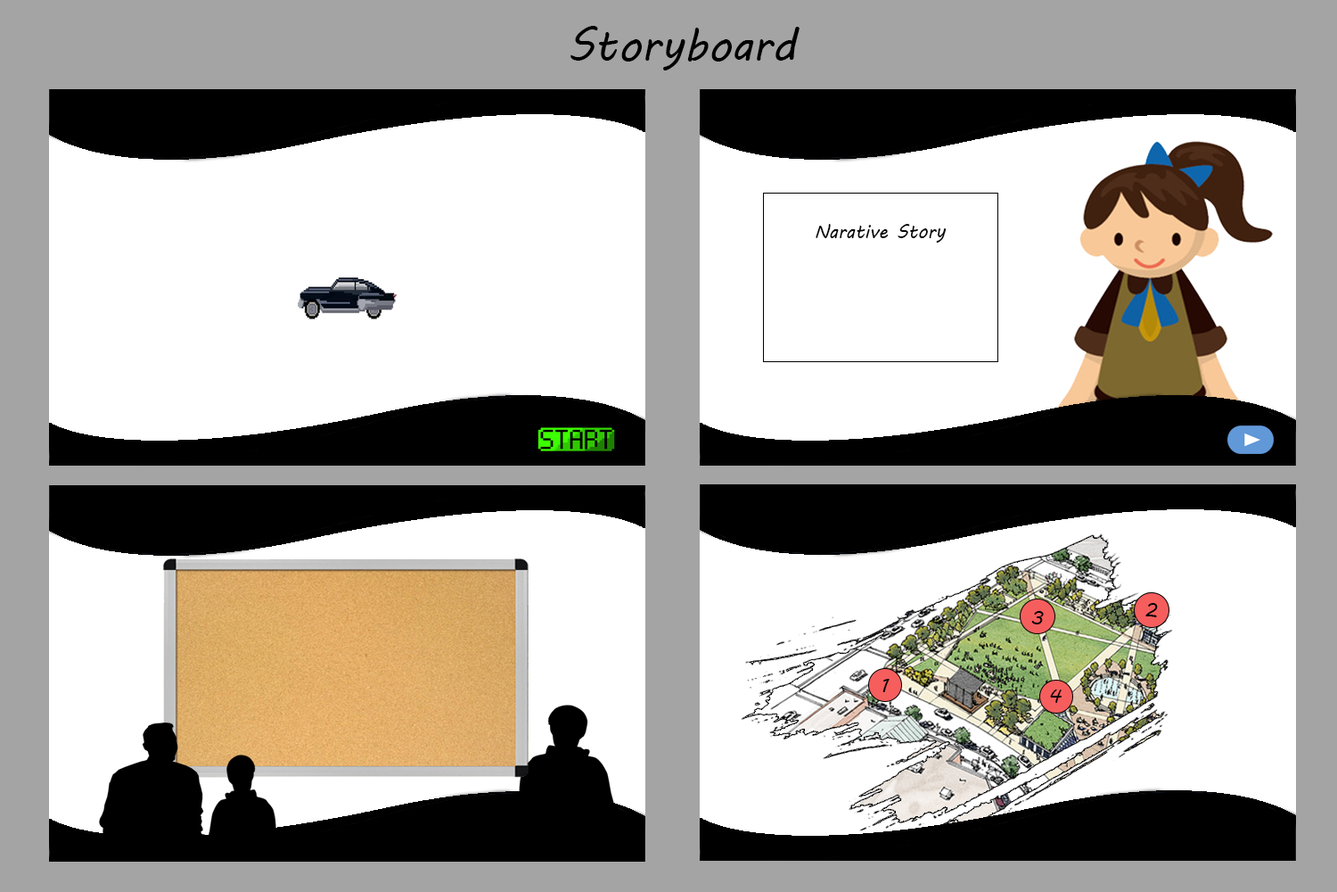
<style>
.page{position:relative;width:1337px;height:892px;background:#ffffff}
.page>*{position:absolute;margin:0}
.t1{font:44.6px "MVBoli";color:#010101}
.t2{font:18.6px "MVBoli";color:#070707}
.t3{font:18.6px "MVBoli";color:#000000}
</style>
<div class="page">
<p class="t1" style="left:571px;top:26px;width:229px;height:44px">Storyboard</p>
<p class="t2" style="left:816px;top:224px;width:131px;height:19px">Narative Story</p>
<p class="t3" style="left:1146px;top:603px;width:12px;height:14px">2</p>
<p class="t3" style="left:1032px;top:611px;width:12px;height:13px">3</p>
<p class="t3" style="left:883px;top:679px;width:7px;height:13px">1</p>
<p class="t3" style="left:1050px;top:689px;width:12px;height:14px">4</p>
</div>
